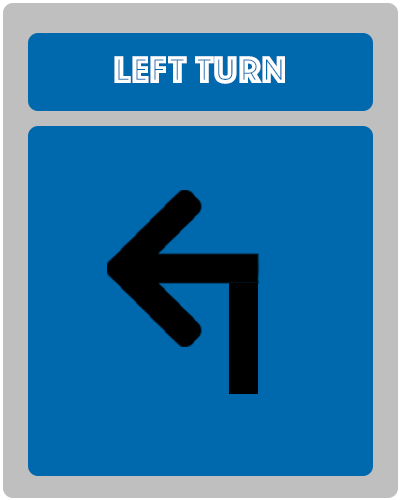
<style>
.page{position:relative;width:400px;height:500px;background:#0069ae}
.page>*{position:absolute;margin:0}
.t1{font:40px "Phosphate-Inline";color:#fefefe}
</style>
<div class="page">
<p class="t1" style="left:114px;top:56px;width:171px;height:28px">LEFT TURN</p>
</div>
